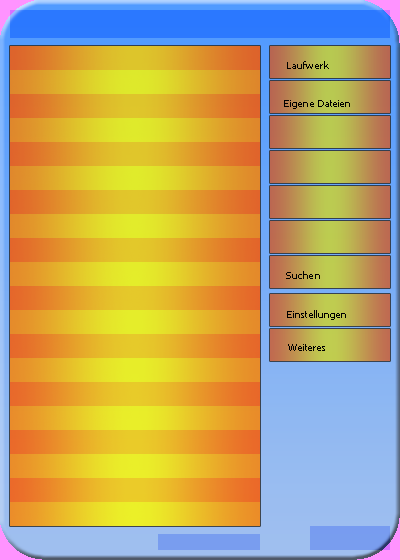
<style>
.page{position:relative;width:400px;height:560px}
.page>*{position:absolute;margin:0}
.t1{font:10px "Tahoma";letter-spacing:0.01em;color:#000000}
</style>
<div class="page">
<p class="t1" style="left:287px;top:61px;width:42px;height:8px">Laufwerk</p>
<p class="t1" style="left:284px;top:100px;width:66px;height:9px">Eigene Dateien</p>
<p class="t1" style="left:286px;top:271px;width:34px;height:8px">Suchen</p>
<p class="t1" style="left:287px;top:310px;width:59px;height:10px">Einstellungen</p>
<p class="t1" style="left:288px;top:344px;width:37px;height:7px">Weiteres</p>
</div>
